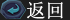
<style>
.page{position:relative;width:70px;height:20px;background:#1f1f1f}
.page>*{position:absolute;margin:0}
.t1{font:19.1px "SimSun";color:#fdfdfd;font-weight:bold}
</style>
<div class="page">
<p class="t1" style="left:27px;top:1px;width:36px;height:18px">返回</p>
</div>
